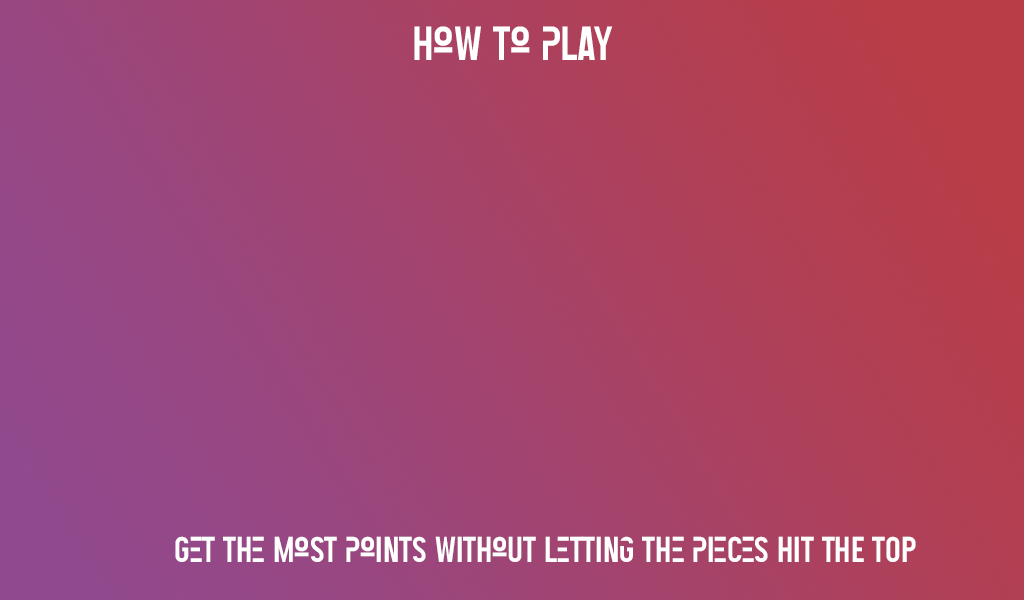
<style>
.page{position:relative;width:1024px;height:600px}
.page>*{position:absolute;margin:0}
.t1{font:48px "TacticoRegular";color:#ffffff}
.t2{font:36px "TacticoRegular";color:#ffffff}
</style>
<div class="page">
<p class="t1" style="left:414px;top:26px;width:199px;height:34px">How to plaY</p>
<p class="t2" style="left:175px;top:536px;width:741px;height:26px">Get the most points without letting the pieces HIT THE TOP</p>
</div>
